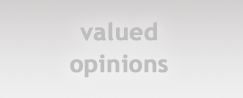
<style>
.page{position:relative;width:243px;height:98px}
.page>*{position:absolute;margin:0}
.t1{font:24px/32px "TrebuchetMS-Bold";color:#bebebe;font-weight:bold}
</style>
<div class="page">
<p class="t1" style="left:70px;top:22px;width:98px;height:56px;text-align:center">valued<br>opinions</p>
</div>
